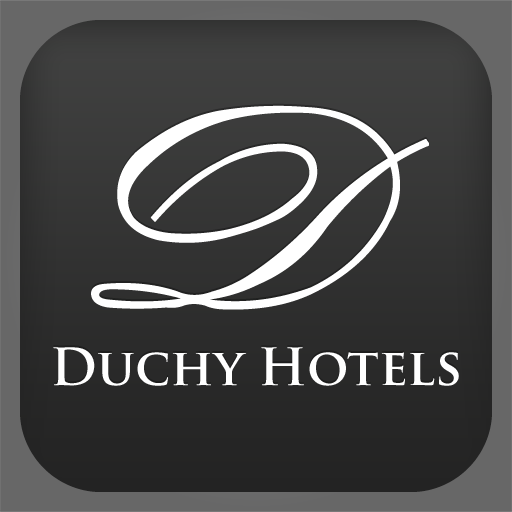
<style>
.page{position:relative;width:512px;height:512px}
.page>*{position:absolute;margin:0}
.t1{font:50.1px "TrajanPro-Bold";color:#ffffff}
</style>
<div class="page">
<p class="t1" style="left:53px;top:347px;width:406px;height:39px">Duchy Hotels</p>
</div>
